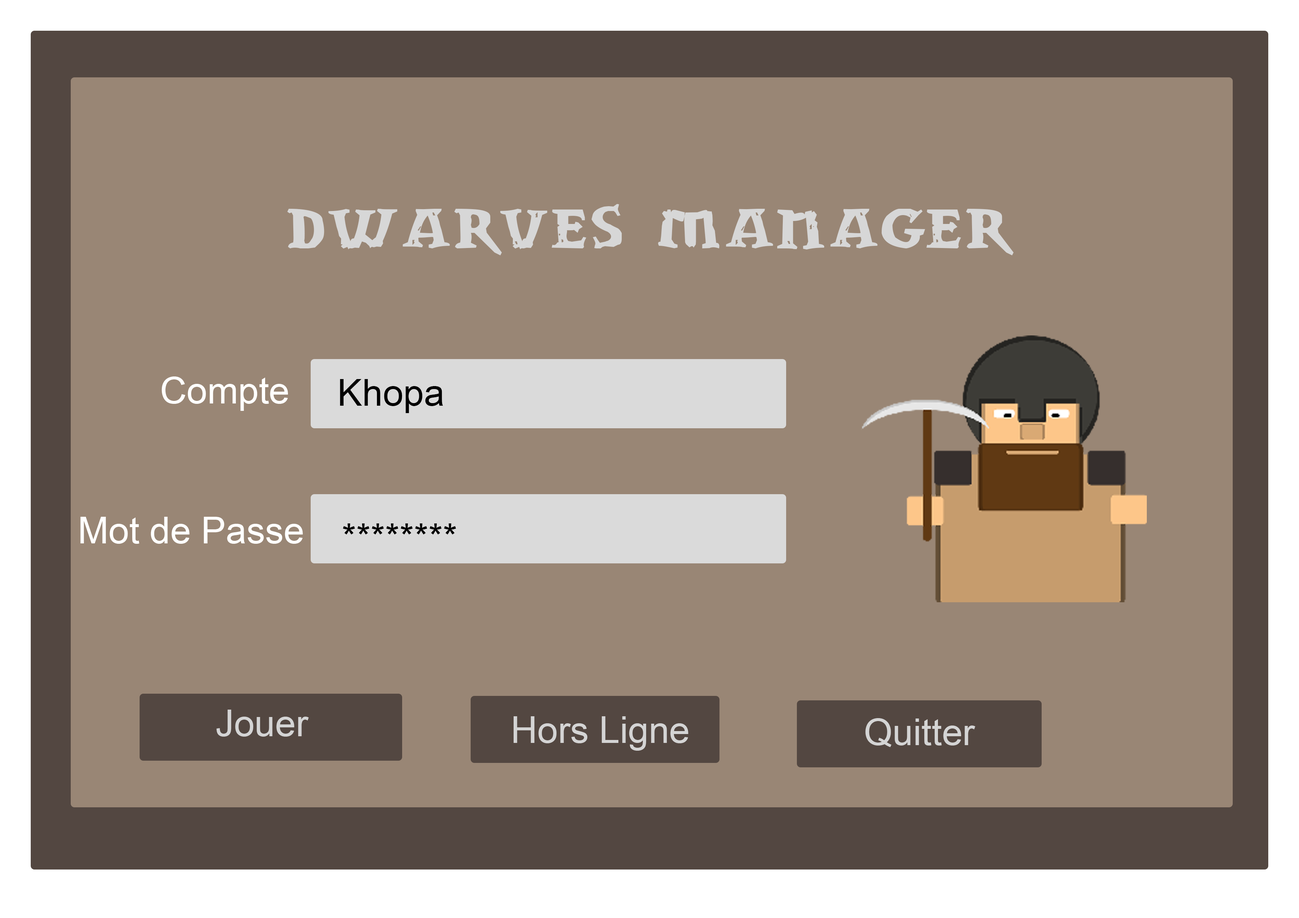
<style>
.page{position:relative;width:1299px;height:918px;background:#998675}
.page>*{position:absolute;margin:0}
.t1{font:74px "drwnstcr";color:#d7d7d7}
.t2{font:37px "ArialMT";color:#fffffe}
.t3{font:37px "ArialMT";color:#000000}
.t4{font:37px "ArialMT";color:#d4d4d4}
</style>
<div class="page">
<p class="t1" style="left:287px;top:204px;width:727px;height:51px">Dwarves Manager</p>
<p class="t2" style="left:161px;top:377px;width:127px;height:34px">Compte</p>
<p class="t3" style="left:340px;top:379px;width:103px;height:34px">Khopa</p>
<p class="t2" style="left:80px;top:517px;width:223px;height:27px">Mot de Passe</p>
<p class="t3" style="left:343px;top:523px;width:113px;height:12px">********</p>
<p class="t4" style="left:216px;top:710px;width:93px;height:27px">Jouer</p>
<p class="t4" style="left:513px;top:716px;width:175px;height:35px">Hors Ligne</p>
<p class="t4" style="left:865px;top:718px;width:110px;height:29px">Quitter</p>
</div>
